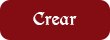
<style>
.page{position:relative;width:110px;height:40px;background:#830d12}
.page>*{position:absolute;margin:0}
.t1{font:13px "BerryRotunda-Regular";color:#ffffff}
</style>
<div class="page">
<p class="t1" style="left:33px;top:12px;width:44px;height:13px">Crear</p>
</div>
